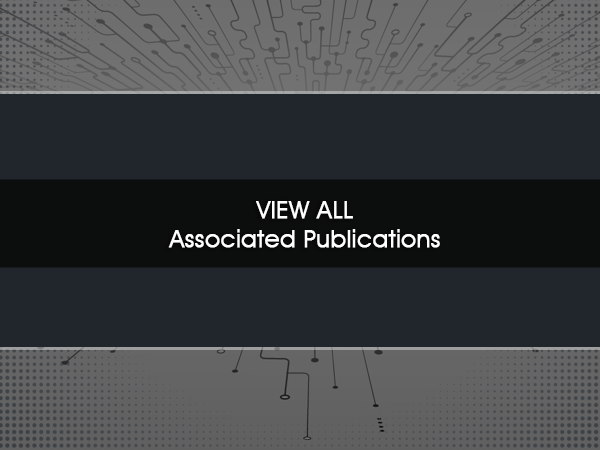
<style>
.page{position:relative;width:600px;height:450px;background:#20262c}
.page>*{position:absolute;margin:0}
.t1{font:24px "AvantGardeITCbyBT-Book";letter-spacing:0.01em;color:#ffffff;font-weight:bold}
</style>
<div class="page">
<p class="t1" style="left:168px;top:201px;width:272px;height:47px;text-align:center">VIEW ALL<br>Associated Publications</p>
</div>
